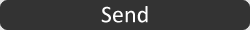
<style>
.page{position:relative;width:250px;height:30px;background:#333333}
.page>*{position:absolute;margin:0}
.t1{font:24px "Calibri";color:#ffffff}
</style>
<div class="page">
<p class="t1" style="left:101px;top:6px;width:47px;height:17px">Send</p>
</div>
